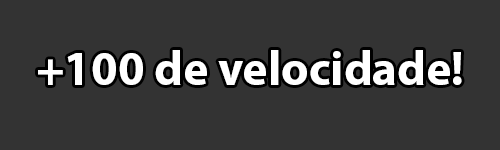
<style>
.page{position:relative;width:500px;height:150px;background:#333333}
.page>*{position:absolute;margin:0}
.t1{font:48px "MyriadPro-Bold";color:#ffffff}
.t2{font:48px "MyriadPro-Bold";color:#000000}
</style>
<div class="page">
<p class="t1" style="left:38px;top:50px;width:424px;height:35px"><span class="t2"><br><br><br></span>+100 de velocidade!</p>
</div>
